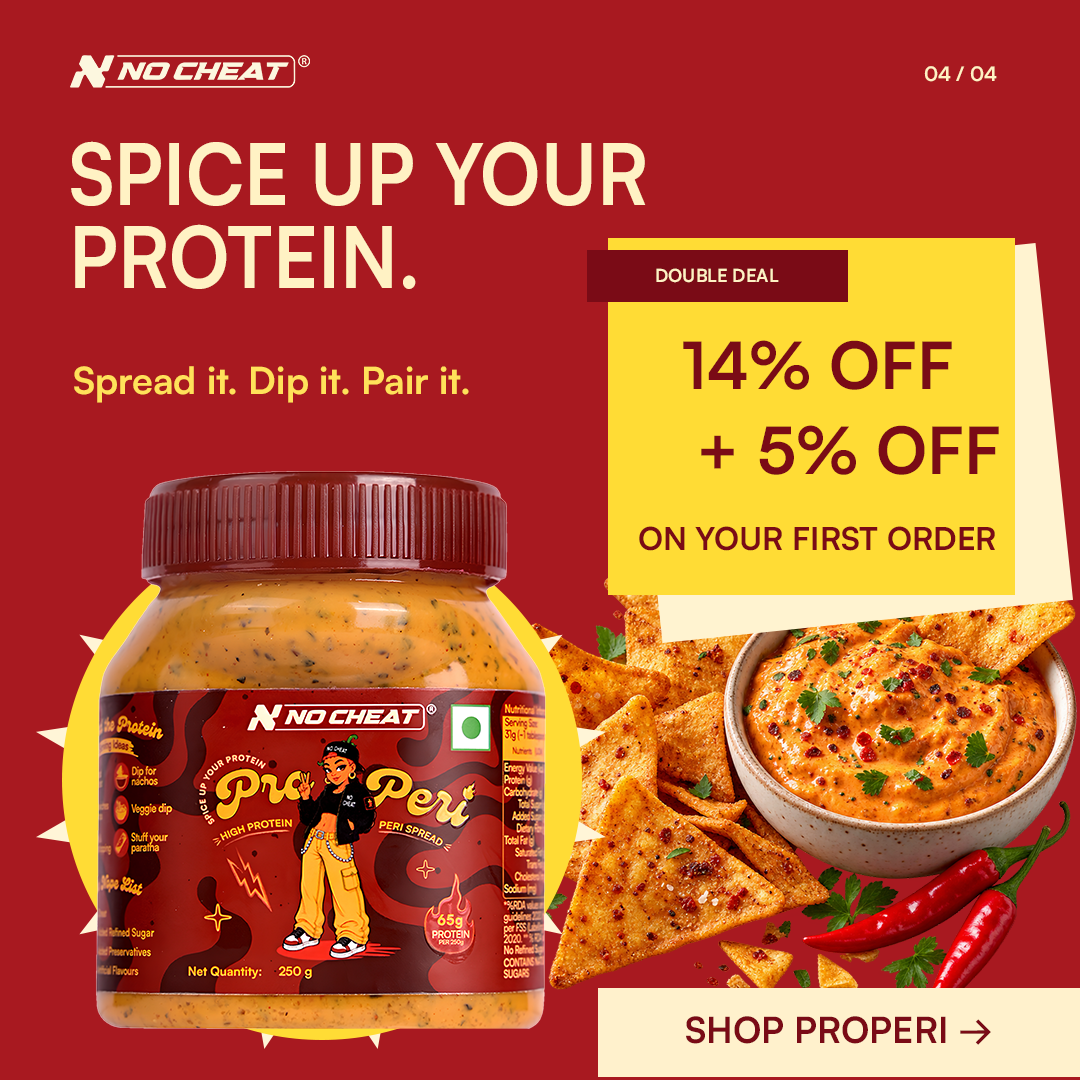
<style>
.page{position:relative;width:1080px;height:1080px;background:#a81920}
.page>*{position:absolute;margin:0}
.t1{font:20px "Satoshi-Bold";color:#fff2c4}
.t2{font:84.9px/82.9px "Satoshi-Bold";color:#fff2c4;scale:0.9 1}
.t3{font:18px "Satoshi-Bold";color:#fff2c4}
.t4{font:65px "Satoshi-Bold";color:#7a0b16}
.t5{font:37.3px "Satoshi-Bold";color:#ffe15a}
.t6{font:31.5px "Satoshi-Bold";color:#7a0b16}
.t7{font:36px "Satoshi-Bold";color:#7a0b16}
</style>
<div class="page">
<p class="t1" style="left:924px;top:66px;width:73px;height:16px">04 / 04</p>
<p class="t2" style="left:71px;top:141px;width:575px;height:148px">SPICE UP YOUR<br>PROTEIN.</p>
<p class="t3" style="left:656px;top:268px;width:123px;height:15px">DOUBLE DEAL</p>
<p class="t4" style="left:683px;top:340px;width:269px;height:50px">14% OFF</p>
<p class="t5" style="left:74px;top:366px;width:395px;height:37px">Spread it. Dip it. Pair it.</p>
<p class="t4" style="left:701px;top:425px;width:298px;height:50px">+ 5% OFF</p>
<p class="t6" style="left:639px;top:526px;width:356px;height:25px">ON YOUR FIRST ORDER</p>
<p class="t7" style="left:686px;top:1016px;width:305px;height:29px">SHOP PROPERI →</p>
</div>
